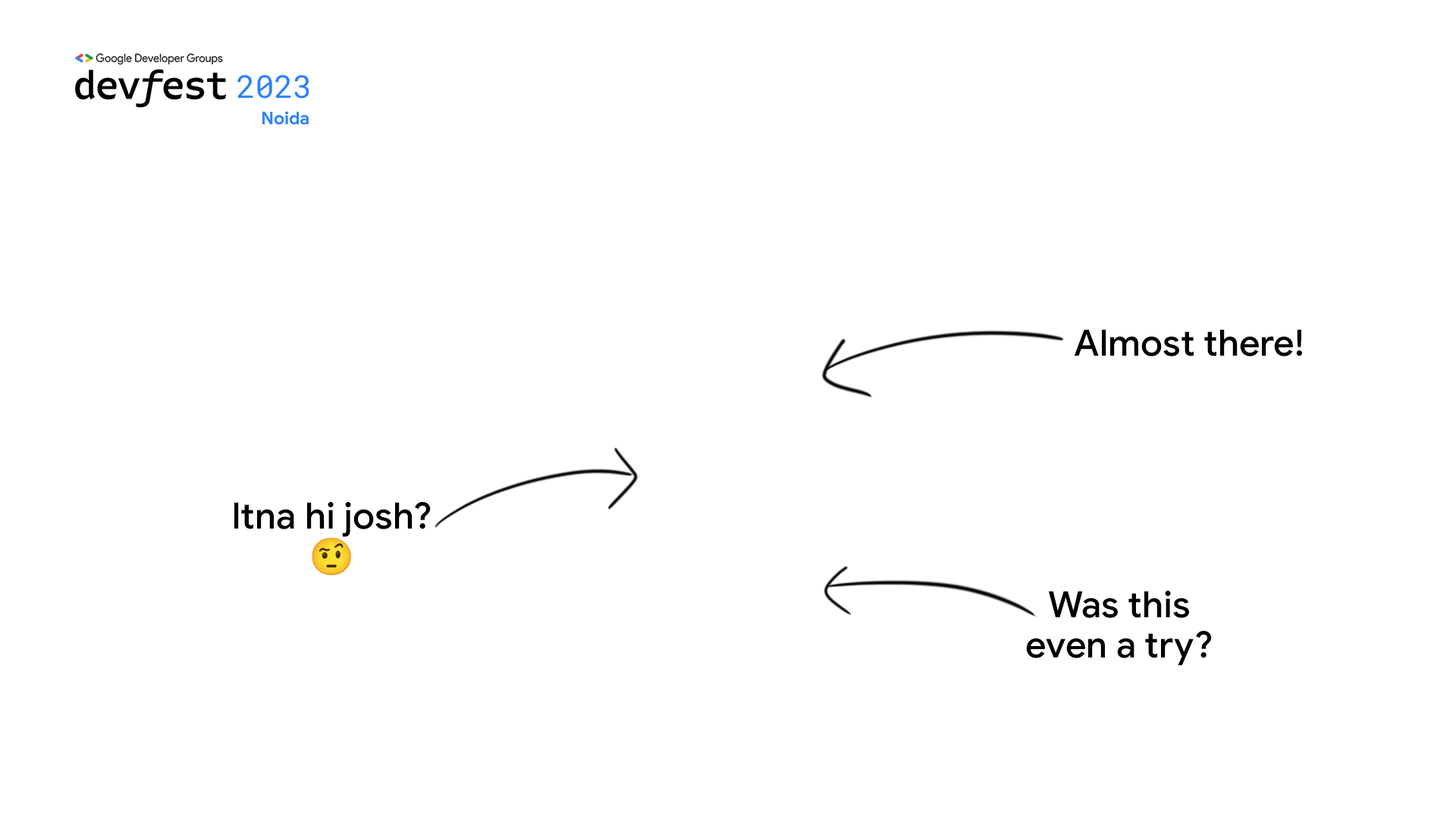
<style>
.page{position:relative;width:1456px;height:819px;background:#ffffff}
.page>*{position:absolute;margin:0}
.t1{font:36.4px "GoogleSans-Medium";color:#000000}
.t2{font:36.4px/40.4px "GoogleSans-Medium"}
.t3{font:36.4px/40.4px "NotoColorEmoji-SVG"}
.t4{font:36.4px/40.4px "GoogleSans-Medium";color:#000000}
</style>
<div class="page">
<p class="t1" style="left:1074px;top:329px;width:228px;height:27px">Almost there!</p>
<p class="t2" style="left:234px;top:501px;width:197px;height:75px;text-align:center">Itna hi josh?<br><span class="t3">🤨</span></p>
<p class="t4" style="left:1026px;top:590px;width:186px;height:76px;text-align:center">Was this<br>even a try?</p>
</div>
